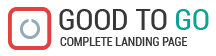
<style>
.page{position:relative;width:216px;height:56px;background:#ffffff}
.page>*{position:absolute;margin:0}
.t1{font:30px "Roboto-Condensed";color:#373737}
.t2{font:30px "Roboto-Condensed";color:#0ba396}
.t3{font:12px "Roboto-Condensed";color:#373737;text-transform:uppercase}
</style>
<div class="page">
<p class="t1" style="left:59px;top:9px;width:150px;height:21px">GOOD TO <span class="t2">GO</span></p>
<p class="t3" style="left:60px;top:37px;width:127px;height:9px">complete landing page</p>
</div>
